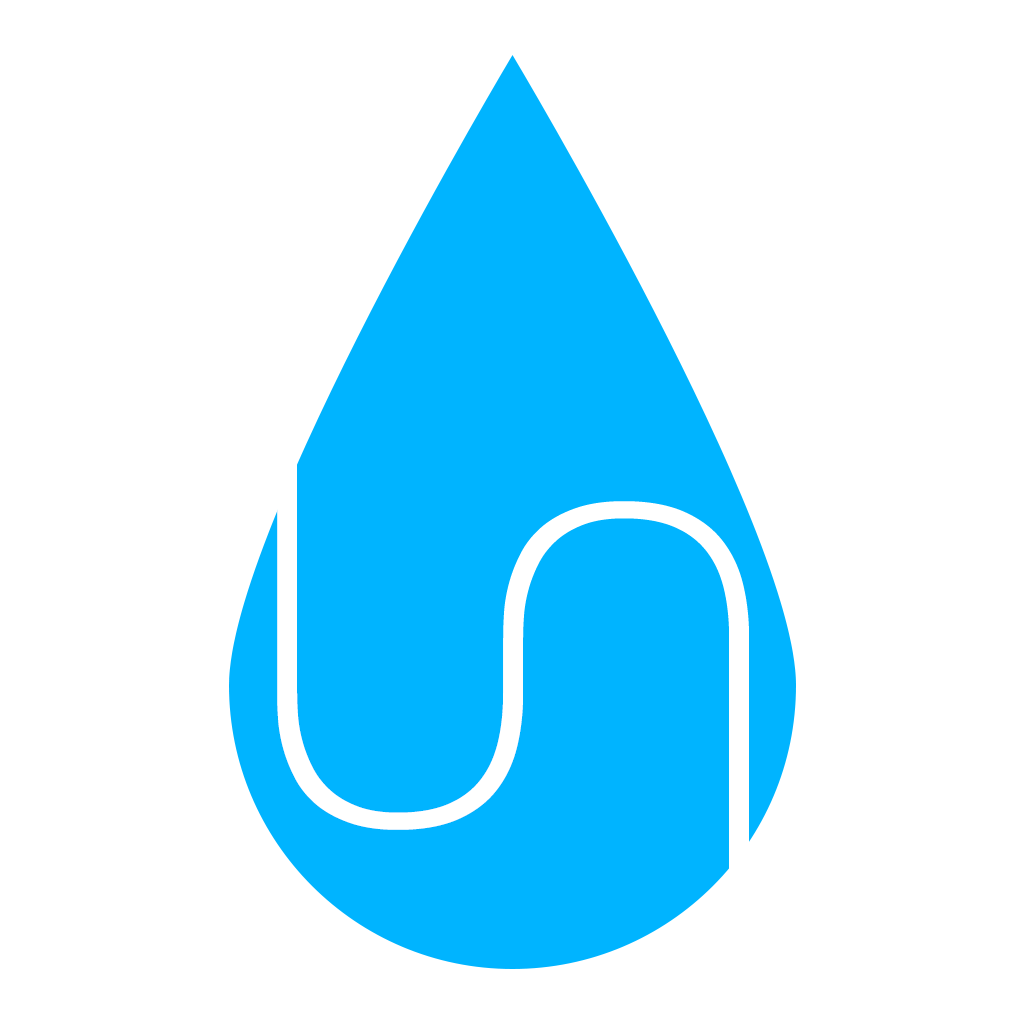
<style>
.page{position:relative;width:1024px;height:1024px;background:#ffffff}
.page>*{position:absolute;margin:0}
.t1{font:450px "HelveticaNeue-Thin";color:#ffffff}
</style>
<div class="page">
<p class="t1" style="left:277px;top:500px;width:246px;height:330px">U</p>
</div>
